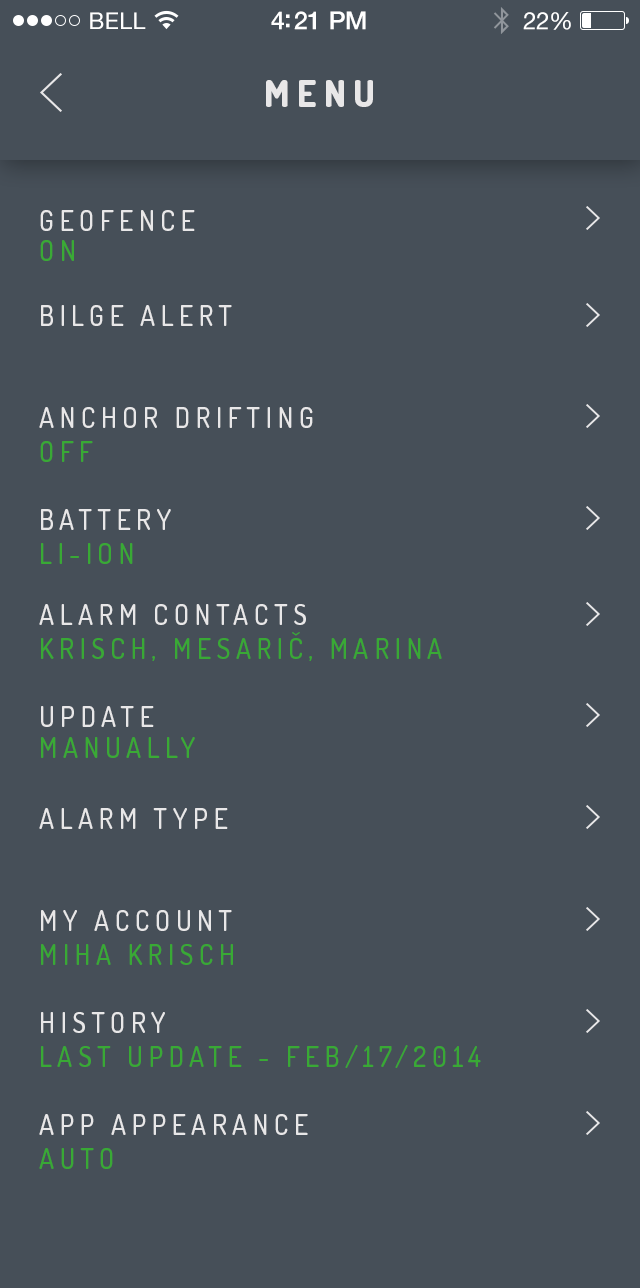
<style>
.page{position:relative;width:640px;height:1288px;background:#464f58}
.page>*{position:absolute;margin:0}
.t1{font:23px "HelveticaNeue";letter-spacing:0.02em;color:#ffffff}
.t2{font:25px "HelveticaNeue-Medium";letter-spacing:-0.02em;color:#ffffff}
.t3{font:24px "HelveticaNeue";letter-spacing:-0.02em;color:#ffffff}
.t4{font:36px "Dosis-ExtraBold";letter-spacing:0.2em;color:#e8e7e8}
.t5{font:28px/105.5px "Dosis-Medium";letter-spacing:0.2em;color:#e8e7e8}
.t6{font:28px/30.4px "Dosis-Medium";letter-spacing:0.2em;color:#3aaa35}
.t7{font:28px "Dosis-Medium";letter-spacing:0.2em;color:#e8e7e8}
.t8{font:28px "Dosis-Medium";letter-spacing:0.2em;color:#39a935}
.t9{font:28px/30.6px "Dosis-Medium";letter-spacing:0.2em;color:#3aaa35}
.t10{font:28px/106.2px "Dosis-Medium";letter-spacing:0.2em;color:#e8e7e8}
</style>
<div class="page">
<p class="t1" style="left:90px;top:12px;width:56px;height:17px">BELL</p>
<p class="t2" style="left:271px;top:11px;width:95px;height:19px">4:21 PM</p>
<p class="t3" style="left:523px;top:12px;width:48px;height:18px">22%</p>
<p class="t4" style="left:266px;top:80px;width:107px;height:27px">MENU</p>
<p class="t5" style="left:40px;top:210px;width:155px;height:51px">GEOFENCE<br><span class="t6">ON</span></p>
<p class="t7" style="left:41px;top:305px;width:191px;height:21px">BILGE ALERT</p>
<p class="t7" style="left:39px;top:407px;width:274px;height:55px">ANCHOR DRIFTING<br><span class="t8">OFF</span></p>
<p class="t7" style="left:41px;top:509px;width:130px;height:55px">BATTERY<br><span class="t8">LI-ION</span></p>
<p class="t8" style="left:39px;top:604px;width:403px;height:57px"><span class="t7">ALARM CONTACTS<br></span>KRISCH, MESARIČ, MARINA</p>
<p class="t9" style="left:41px;top:706px;width:154px;height:52px"><span class="t10">UPDATE<br></span>MANUALLY</p>
<p class="t7" style="left:39px;top:808px;width:189px;height:21px">ALARM TYPE</p>
<p class="t8" style="left:41px;top:910px;width:192px;height:55px"><span class="t7">MY ACCOUNT<br></span>MIHA KRISCH</p>
<p class="t8" style="left:41px;top:1012px;width:440px;height:56px"><span class="t7">HISTORY<br></span>LAST UPDATE - FEB/17/2014</p>
<p class="t7" style="left:39px;top:1114px;width:269px;height:55px">APP APPEARANCE<br><span class="t8">AUTO</span></p>
</div>
